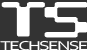
<style>
.page{position:relative;width:87px;height:50px;background:#333333}
.page>*{position:absolute;margin:0}
.t1{font:46.2px "Amoebic";letter-spacing:-0.1em;color:#ffffff;font-weight:bold;scale:2.09 1}
.t2{font:13.4px "Corbel";letter-spacing:-0.085em;color:#ffffff;scale:1.43 1}
</style>
<div class="page">
<p class="t1" style="left:1px;top:2px;width:87px;height:36px">TS</p>
<p class="t2" style="left:0px;top:40px;width:88px;height:11px">TECHSENSE</p>
</div>
